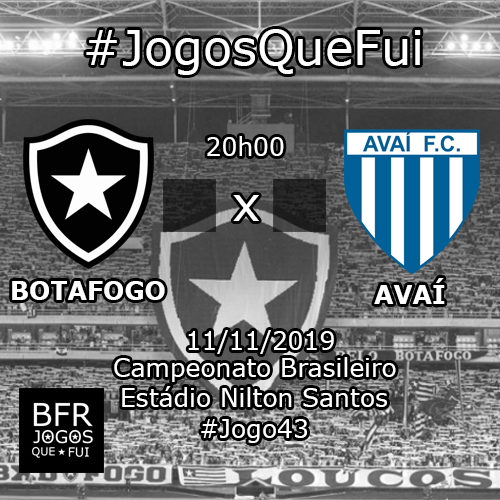
<style>
.page{position:relative;width:500px;height:500px}
.page>*{position:absolute;margin:0}
.t1{font:48px "Verdana";color:#ffffff}
.t2{font:25px "Verdana";color:#ffffff}
.t3{font:25px "Verdana-Bold";color:#ffffff}
</style>
<div class="page">
<p class="t1" style="left:86px;top:29px;width:335px;height:46px">#JogosQueFui</p>
<p class="t2" style="left:207px;top:136px;width:77px;height:20px">20h00</p>
<p class="t1" style="left:233px;top:195px;width:26px;height:26px">x</p>
<p class="t3" style="left:12px;top:281px;width:153px;height:19px">BOTAFOGO</p>
<p class="t3" style="left:374px;top:278px;width:71px;height:26px">AVAÍ</p>
<p class="t2" style="left:188px;top:330px;width:146px;height:24px">11/11/2019</p>
<p class="t2" style="left:114px;top:357px;width:282px;height:25px">Campeonato Brasileiro</p>
<p class="t2" style="left:122px;top:386px;width:265px;height:21px">Estádio Nilton Santos</p>
<p class="t2" style="left:201px;top:419px;width:106px;height:24px">#Jogo43</p>
</div>
